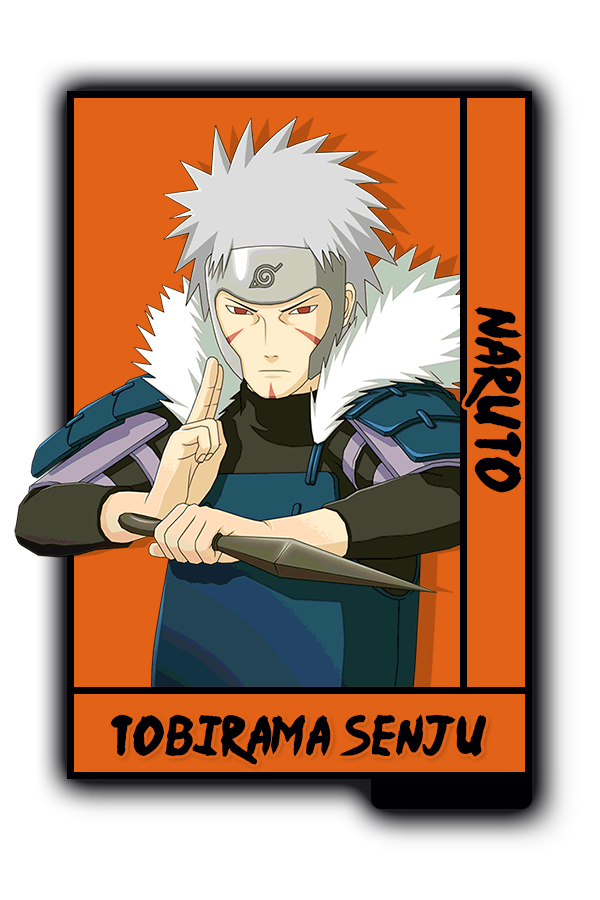
<style>
.page{position:relative;width:600px;height:900px;background:#ffffff}
.page>*{position:absolute;margin:0}
.t1{font:52px "Ninja-Naruto";color:#010005}
.t2{font:45.6px "Ninja-Naruto";color:#010005}
</style>
<div class="page">
<p class="t1" style="left:464px;top:307px;width:59px;height:186px;rotate:90deg">Naruto</p>
<p class="t2" style="left:110px;top:714px;width:376px;height:51px">Tobirama Senju</p>
</div>
